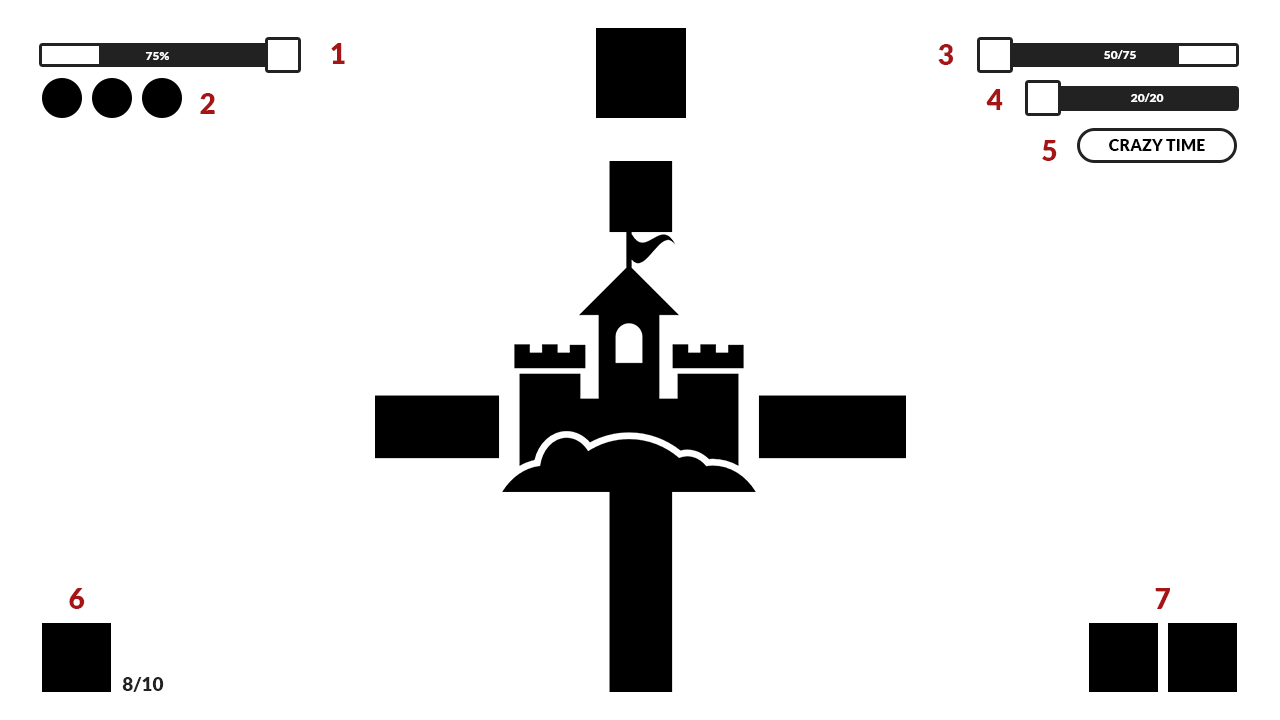
<style>
.page{position:relative;width:1280px;height:720px;background:#ffffff}
.page>*{position:absolute;margin:0}
.t1{font:12.5px "Lato-Black";color:#ffffff}
.t2{font:28px "Lato-Black";color:#a51515}
.t3{font:12px "Lato-Black";color:#ffffff}
.t4{font:16.2px "Lato-Black";color:#000000;text-transform:uppercase}
.t5{font:19.4px "Lato-Black";color:#222222}
</style>
<div class="page">
<p class="t1" style="left:145px;top:52px;width:24px;height:8px">75%</p>
<p class="t2" style="left:331px;top:43px;width:14px;height:21px">1</p>
<p class="t2" style="left:938px;top:44px;width:15px;height:21px">3</p>
<p class="t3" style="left:1104px;top:50px;width:32px;height:9px">50/75</p>
<p class="t2" style="left:986px;top:89px;width:17px;height:21px">4</p>
<p class="t2" style="left:200px;top:93px;width:15px;height:21px">2</p>
<p class="t3" style="left:1131px;top:93px;width:33px;height:9px">20/20</p>
<p class="t2" style="left:1042px;top:140px;width:15px;height:21px">5</p>
<p class="t4" style="left:1109px;top:139px;width:96px;height:12px">crazy time</p>
<p class="t2" style="left:69px;top:588px;width:16px;height:21px">6</p>
<p class="t2" style="left:1155px;top:588px;width:15px;height:21px">7</p>
<p class="t5" style="left:122px;top:677px;width:42px;height:15px">8/10</p>
</div>
